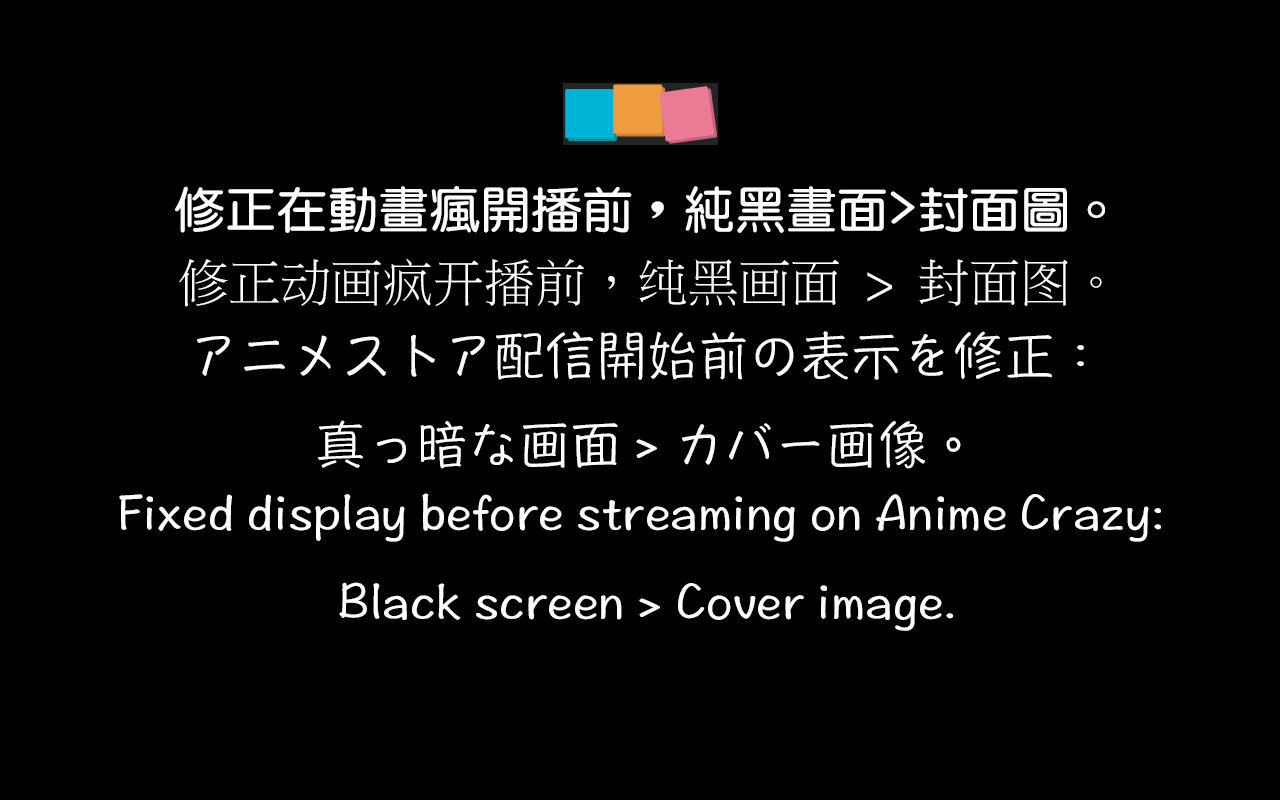
<style>
.page{position:relative;width:1280px;height:800px;background:#000000}
.page>*{position:absolute;margin:0}
.t1{font:51px "©M¥­²Ê¶ê";color:#ffffff}
.t2{font:51px "MingLiU";color:#ffffff}
.t3{font:51px "DFPHannotateW5-B5-TW";color:#ffffff}
</style>
<div class="page">
<p class="t1" style="left:175px;top:186px;width:930px;height:47px">修正在動畫瘋開播前，純黑畫面&gt;封面圖。</p>
<p class="t2" style="left:179px;top:259px;width:923px;height:48px">修正动画疯开播前，纯黑画面 &gt; 封面图。</p>
<p class="t3" style="left:197px;top:331px;width:887px;height:138px;text-align:center">アニメストア配信開始前の表示を修正：<br>真っ暗な画面 &gt; カバー画像。</p>
<p class="t3" style="left:119px;top:493px;width:1042px;height:138px;text-align:center">Fixed display before streaming on Anime Crazy: <br>Black screen &gt; Cover image.</p>
</div>
